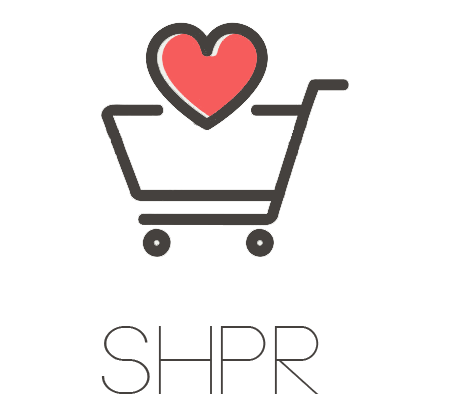
<style>
.page{position:relative;width:450px;height:419px;background:#ffffff}
.page>*{position:absolute;margin:0}
.t1{font:95px "Neou-Thin";color:#45413e}
</style>
<div class="page">
<p class="t1" style="left:101px;top:326px;width:218px;height:68px">SHPR</p>
</div>
